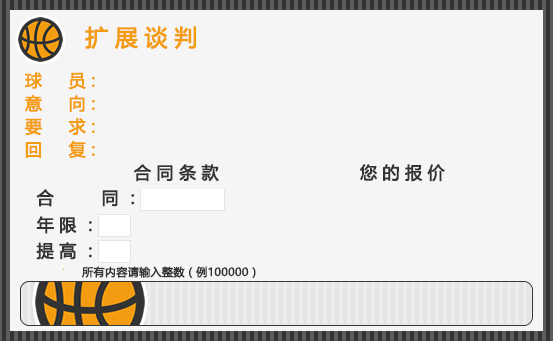
<style>
.page{position:relative;width:553px;height:341px;background:#f5f5f5}
.page>*{position:absolute;margin:0}
.t1{font:23px "MicrosoftYaHei";letter-spacing:0.26em;color:#f39c12;font-weight:bold}
.t2{font:17px "MicrosoftYaHei";letter-spacing:0.3em;color:#f39c12;font-weight:bold}
.t3{font:17px "MicrosoftYaHei";letter-spacing:0.3em;color:#333333;font-weight:bold}
.t4{font:11px "MicrosoftYaHei";letter-spacing:0.01em;color:#333333;font-weight:bold}
</style>
<div class="page">
<p class="t1" style="left:85px;top:26px;width:111px;height:24px">扩展谈判</p>
<p class="t2" style="left:24px;top:72px;width:71px;height:18px">球  员:</p>
<p class="t2" style="left:25px;top:94px;width:70px;height:18px">意  向:</p>
<p class="t2" style="left:24px;top:118px;width:71px;height:18px">要  求:</p>
<p class="t2" style="left:25px;top:141px;width:70px;height:18px">回  复:</p>
<p class="t3" style="left:133px;top:164px;width:86px;height:18px">合同条款</p>
<p class="t3" style="left:359px;top:164px;width:86px;height:18px">您的报价</p>
<p class="t3" style="left:36px;top:189px;width:99px;height:18px">合    同：</p>
<p class="t3" style="left:36px;top:216px;width:56px;height:18px">年限：</p>
<p class="t3" style="left:36px;top:242px;width:56px;height:18px">提高：</p>
<p class="t4" style="left:82px;top:266px;width:174px;height:12px">所有内容请输入整数（例100000）</p>
</div>
